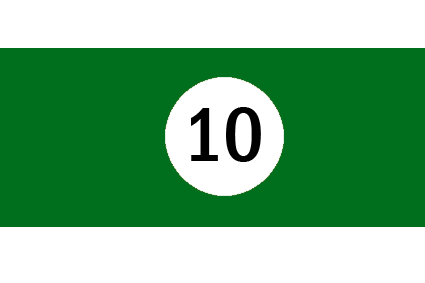
<style>
.page{position:relative;width:425px;height:283px;background:#006f1d}
.page>*{position:absolute;margin:0}
.t1{font:80px "FranklinGothic-MediumCond";color:#000000}
</style>
<div class="page">
<p class="t1" style="left:191px;top:107px;width:70px;height:55px">10</p>
</div>
